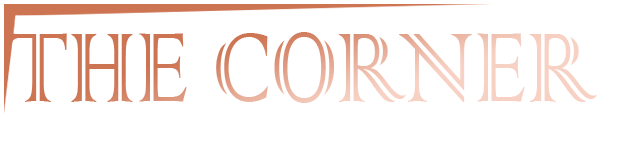
<style>
.page{position:relative;width:622px;height:162px;background:#ffffff}
.page>*{position:absolute;margin:0}
.t1{font:129.9px "ColonnaMT";scale:0.77 1}
</style>
<div class="page">
<p class="t1" style="left:8px;top:32px;width:589px;height:71px">THE CORNER</p>
</div>
